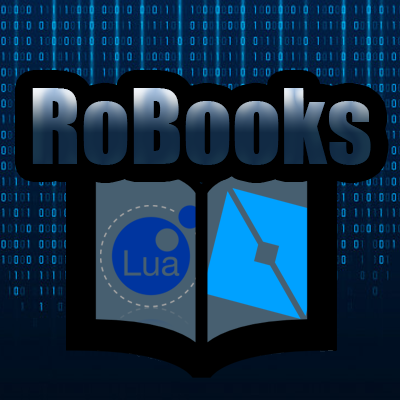
<style>
.page{position:relative;width:400px;height:400px;background:#000000}
.page>*{position:absolute;margin:0}
.t1{font:96px "Impact"}
</style>
<div class="page">
<p class="t1" style="left:32px;top:88px;width:339px;height:77px">RoBooks</p>
</div>
